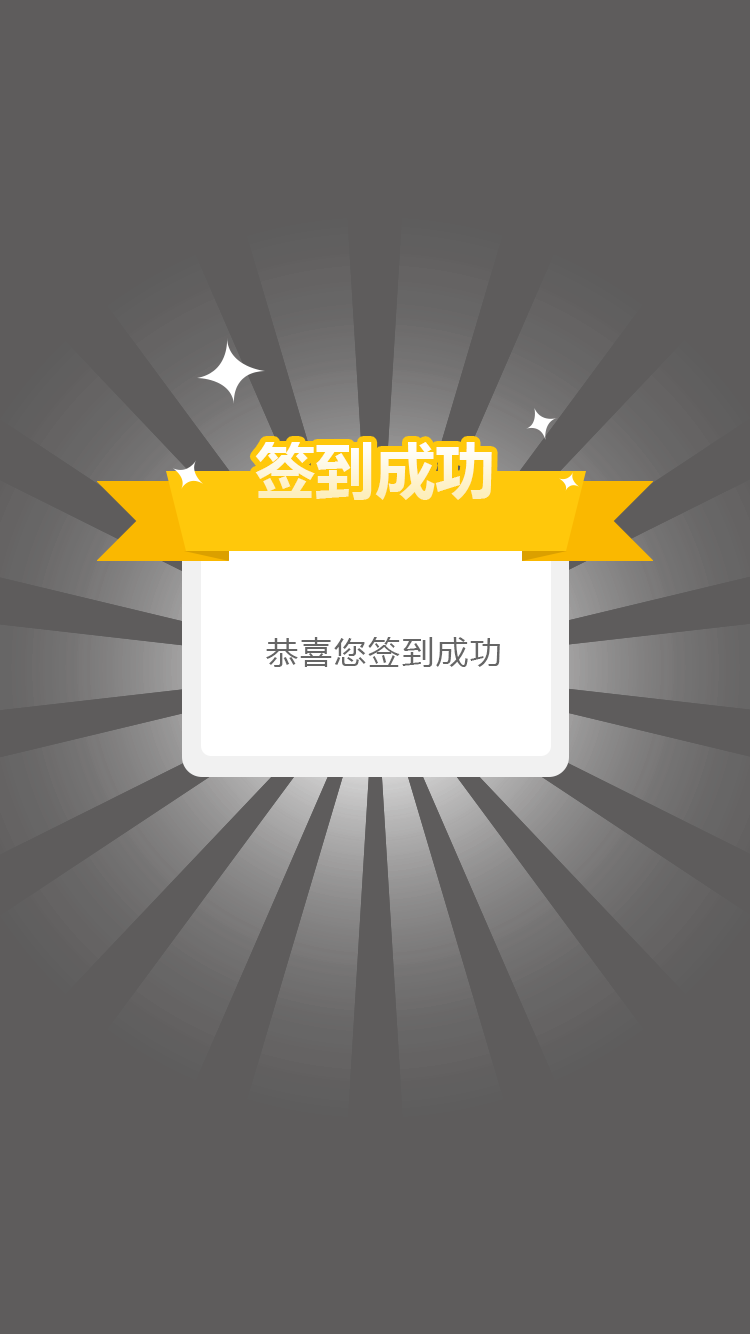
<style>
.page{position:relative;width:750px;height:1334px;background:#5e5c5c}
.page>*{position:absolute;margin:0}
.t1{font:60px "MicrosoftYaHei-Bold"}
.t2{font:32px "MicrosoftYaHei";letter-spacing:0.06em;color:#666666}
</style>
<div class="page">
<p class="t1" style="left:255px;top:442px;width:237px;height:58px">签到成功</p>
<p class="t2" style="left:266px;top:637px;width:234px;height:30px">恭喜您签到成功</p>
</div>
